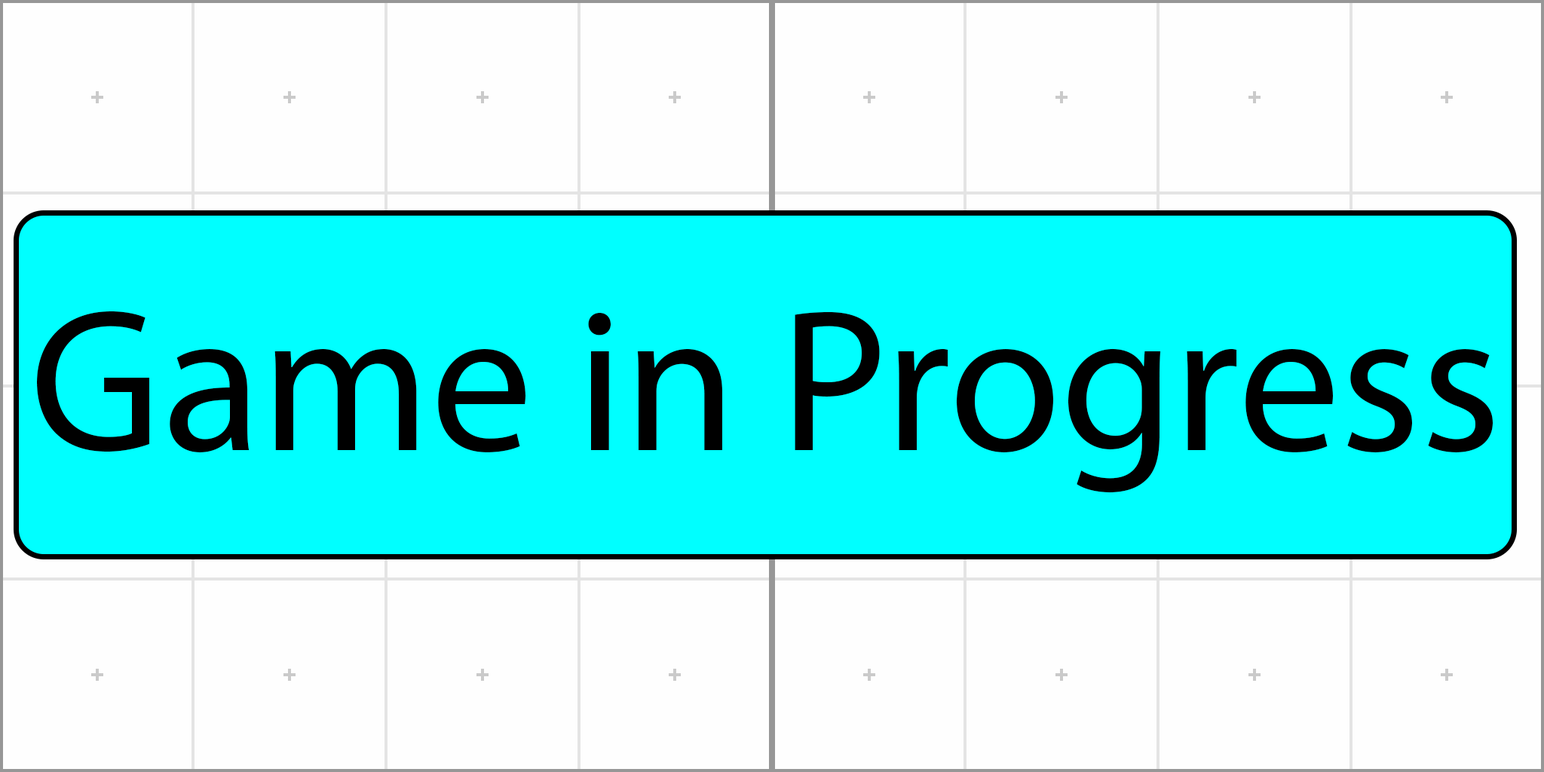
<style>
.page{position:relative;width:1544px;height:772px;background:#fefefe}
.page>*{position:absolute;margin:0}
.t1{font:203.6px "MyriadPro-Regular";color:#000000}
</style>
<div class="page">
<p class="t1" style="left:37px;top:311px;width:1456px;height:182px">Game in Progress</p>
</div>
